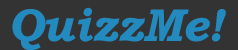
<style>
.page{position:relative;width:238px;height:50px;background:#333333}
.page>*{position:absolute;margin:0}
.t1{font:37.5px "AdobeHeitiStd-Regular";color:#f2f8ff}
.t2{font:45.8px "BookmanOldStyle-BoldItalic";color:#228abf}
.t3{font:12px "AdobeHeitiStd-Regular";color:#f2f8ff}
</style>
<div class="page">
<p class="t1" style="left:12px;top:7px;width:214px;height:44px"><span class="t2">QuizzMe! </span>qqqqqqqqQ<span class="t3">Q</span></p>
</div>
